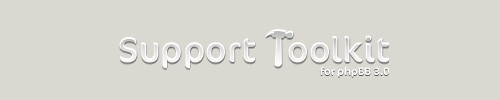
<style>
.page{position:relative;width:500px;height:100px;background:#dbd8d1}
.page>*{position:absolute;margin:0}
.t1{font:36px "CoconOT-Regular";color:#ffffff}
.t2{font:11px "CoconOT-Regular";color:#ffffff}
</style>
<div class="page">
<p class="t1" style="left:119px;top:35px;width:270px;height:33px">Support    oolkit</p>
<p class="t2" style="left:320px;top:67px;width:69px;height:10px">for phpBB 3.0</p>
</div>
